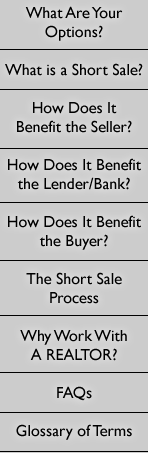
<style>
.page{position:relative;width:148px;height:453px;background:#cccccc}
.page>*{position:absolute;margin:0}
.t1{font:16px/19px "GillSansMT";color:#000000}
</style>
<div class="page">
<p class="t1" style="left:5px;top:6px;width:138px;height:434px;text-align:center">What Are Your<br>Options?<br><br>What is a Short Sale?<br><br>How Does It<br>Benefit the Seller?<br><br>How Does It Benefit<br>the Lender/Bank?<br><br>How Does It Benefit<br>the Buyer?<br><br>The Short Sale<br>Process<br><br>Why Work With<br>A REALTOR?<br><br>FAQs<br><br>Glossary of Terms</p>
</div>
